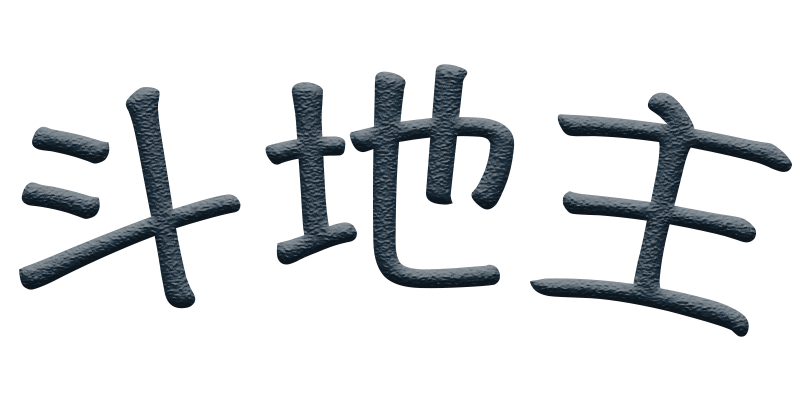
<style>
.page{position:relative;width:800px;height:400px;background:#ffffff}
.page>*{position:absolute;margin:0}
.t1{font:240px "HannotateTC-W7"}
</style>
<div class="page">
<p class="t1" style="left:18px;top:64px;width:774px;height:273px">斗地主</p>
</div>
